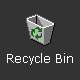
<style>
.page{position:relative;width:80px;height:80px;background:#333333}
.page>*{position:absolute;margin:0}
.t1{font:12px "MSReferenceSansSerif";color:#ffffff}
</style>
<div class="page">
<p class="t1" style="left:7px;top:53px;width:66px;height:12px">Recycle Bin</p>
</div>
